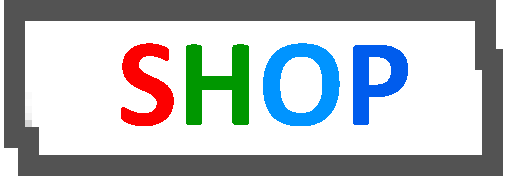
<style>
.page{position:relative;width:512px;height:176px;background:#ffffff}
.page>*{position:absolute;margin:0}
.t1{font:127.4px "Calibri-Bold";color:#fc0000}
.t2{font:127.4px "Calibri-Bold";color:#009700}
.t3{font:127.4px "Calibri-Bold";color:#0094ff}
.t4{font:127.4px "Calibri-Bold";color:#005ced}
</style>
<div class="page">
<p class="t1" style="left:121px;top:43px;width:287px;height:83px">S<span class="t2">H</span><span class="t3">O</span><span class="t4">P</span></p>
</div>
